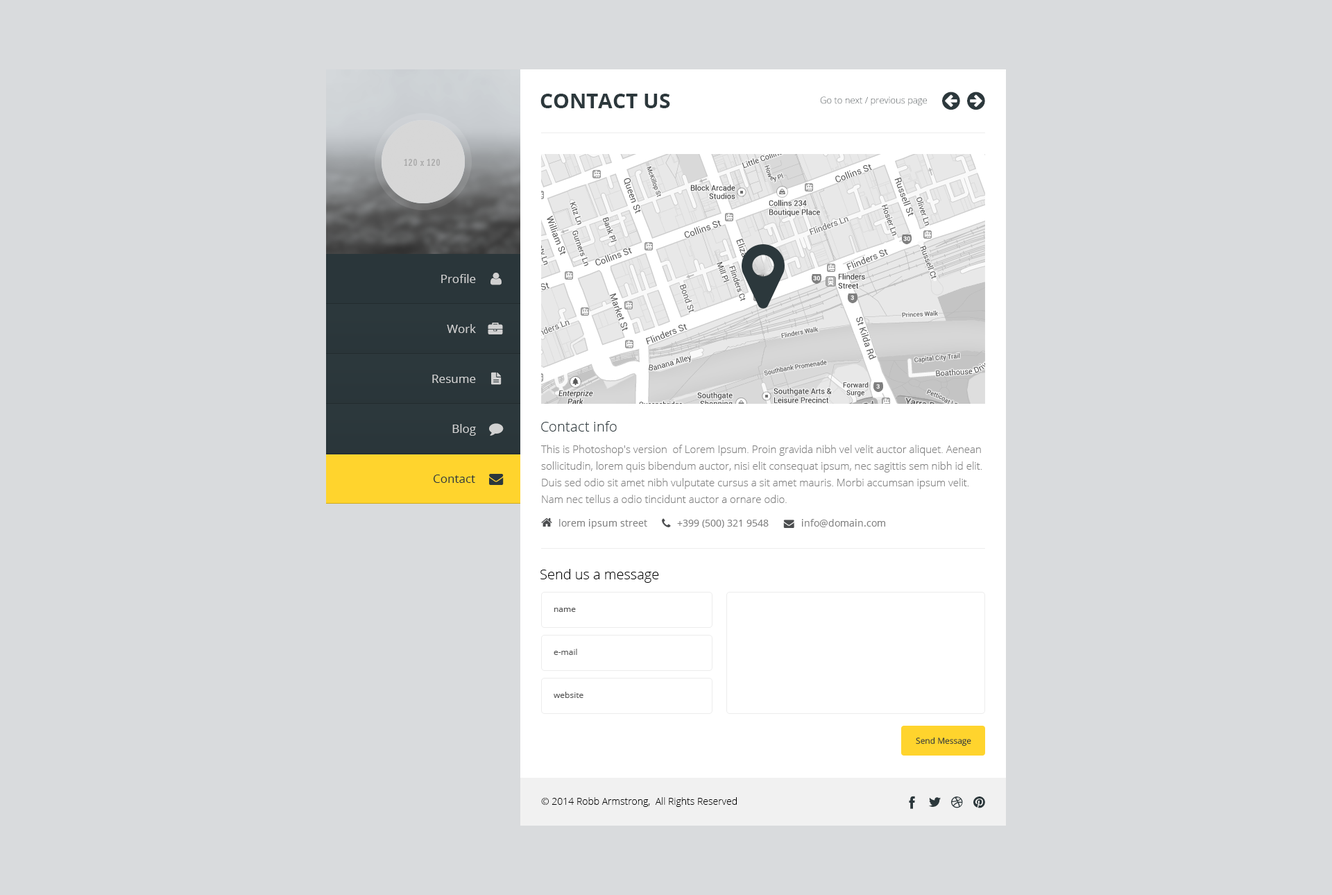
<style>
.page{position:relative;width:1332px;height:895px;background:#d9dbdd}
.page>*{position:absolute;margin:0}
.t1{font:20.8px "OpenSans-Bold";color:#2c383c;text-transform:uppercase}
.t2{font:9px "OpenSans-Light"}
.t3{font:11.8px "OpenSans";color:#d1d1d1}
.t4{font:13.9px "OpenSans-Light";color:#2c383c}
.t5{font:10.4px/16.7px "OpenSans-Light";color:#828282}
.t6{font:11.8px "OpenSans";color:#2c383c}
.t7{font:9.7px "OpenSans";color:#828282}
.t8{font:13.9px "OpenSans-Light";color:#000000}
.t9{font:8.3px "OpenSans";color:#555555}
.t10{font:8.3px "OpenSans";color:#2b373b}
.t11{font:9.7px "OpenSans-Light";color:#000000}
</style>
<div class="page">
<p class="t1" style="left:541px;top:94px;width:129px;height:14px">Contact us</p>
<p class="t2" style="left:820px;top:96px;width:107px;height:9px">Go to next / previous page</p>
<p class="t3" style="left:441px;top:274px;width:35px;height:9px">Profile</p>
<p class="t3" style="left:447px;top:324px;width:29px;height:9px">Work</p>
<p class="t3" style="left:432px;top:375px;width:44px;height:8px">Resume</p>
<p class="t3" style="left:452px;top:424px;width:24px;height:12px">Blog</p>
<p class="t4" style="left:541px;top:421px;width:76px;height:11px">Contact info</p>
<p class="t5" style="left:541px;top:445px;width:442px;height:58px">This is Photoshop's version  of Lorem Ipsum. Proin gravida nibh vel velit auctor aliquet. Aenean sollicitudin, lorem quis bibendum auctor, nisi elit consequat ipsum, nec sagittis sem nibh id elit. Duis sed odio sit amet nibh vulputate cursus a sit amet mauris. Morbi accumsan ipsum velit. Nam nec tellus a odio tincidunt auctor a ornare odio.</p>
<p class="t6" style="left:433px;top:475px;width:42px;height:8px">Contact</p>
<p class="t7" style="left:559px;top:519px;width:88px;height:10px">lorem ipsum street</p>
<p class="t7" style="left:677px;top:520px;width:92px;height:8px">+399 (500) 321 9548</p>
<p class="t7" style="left:802px;top:519px;width:83px;height:8px">info@domain.com</p>
<p class="t8" style="left:541px;top:569px;width:118px;height:14px">Send us a message</p>
<p class="t9" style="left:554px;top:608px;width:22px;height:4px">name</p>
<p class="t9" style="left:554px;top:649px;width:23px;height:6px">e-mail</p>
<p class="t9" style="left:554px;top:692px;width:30px;height:6px">website</p>
<p class="t10" style="left:916px;top:737px;width:55px;height:10px">Send Message</p>
<p class="t11" style="left:541px;top:797px;width:196px;height:10px">© 2014 Robb Armstrong,  All Rights Reserved</p>
</div>
